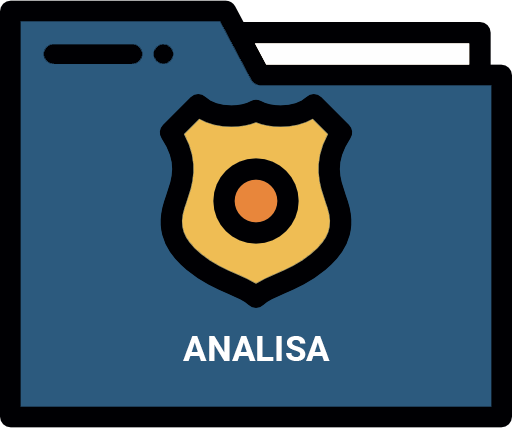
<style>
.page{position:relative;width:512px;height:428px;background:#2c5a7e}
.page>*{position:absolute;margin:0}
.t1{font:35px "Roboto-Bold";color:#ffffff}
</style>
<div class="page">
<p class="t1" style="left:183px;top:336px;width:147px;height:25px">ANALISA</p>
</div>
